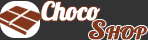
<style>
.page{position:relative;width:148px;height:40px;background:#333333}
.page>*{position:absolute;margin:0}
.t1{font:25px "Lobster-Regular";letter-spacing:-0.02em;color:#ffffff;font-weight:bold}
.t2{font:25.5px "Lobster-Regular";letter-spacing:-0.02em;color:#84361a;font-variant:small-caps;font-weight:bold;scale:1.18 1}
</style>
<div class="page">
<p class="t1" style="left:41px;top:1px;width:59px;height:20px">Choco</p>
<p class="t2" style="left:89px;top:20px;width:58px;height:20px">Shop</p>
</div>
